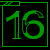
<style>
.page{position:relative;width:50px;height:50px;background:#000000}
.page>*{position:absolute;margin:0}
.t1{font:33.3px "ABitEmpty";color:#009900}
</style>
<div class="page">
<p class="t1" style="left:6px;top:10px;width:38px;height:29px">16</p>
</div>
